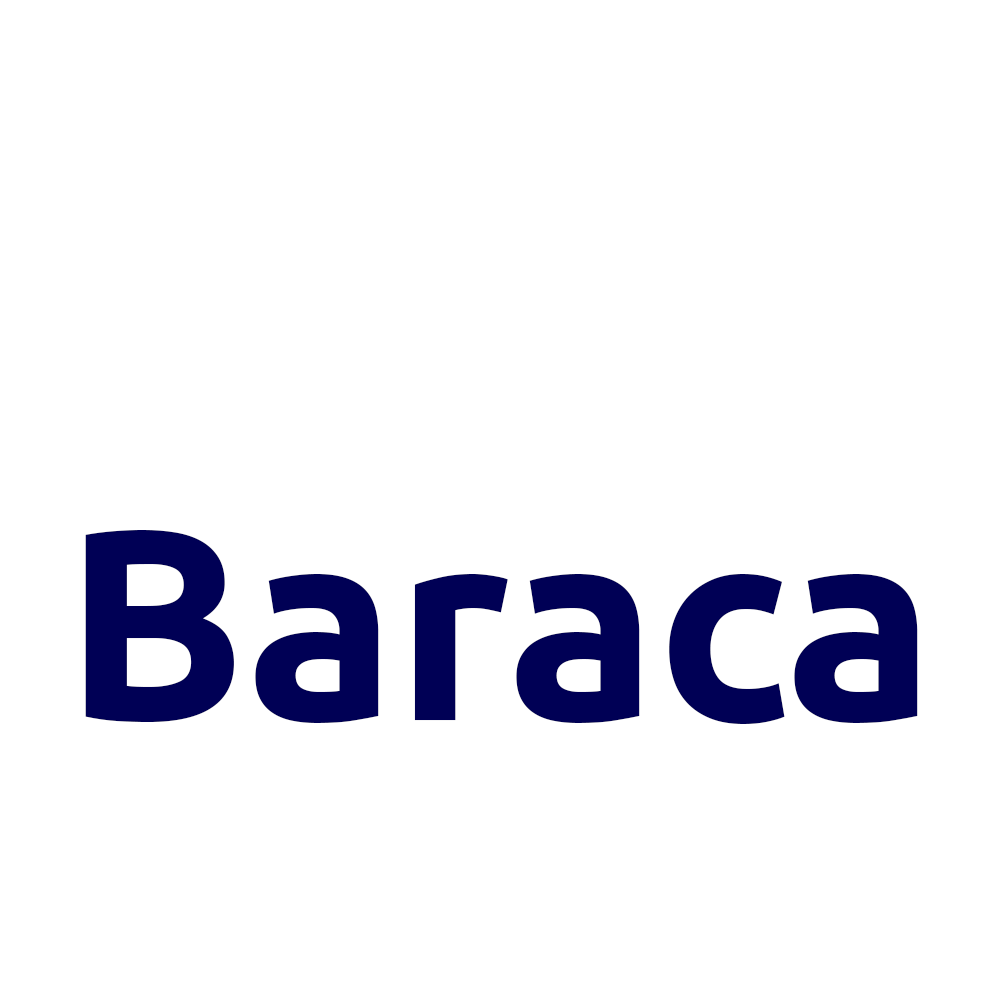
<style>
.page{position:relative;width:1000px;height:1000px;background:#ffffff}
.page>*{position:absolute;margin:0}
.t1{font:270.7px "Ubuntu-Bold";color:#000055}
</style>
<div class="page">
<p class="t1" style="left:85px;top:530px;width:833px;height:194px">Baraca</p>
</div>
